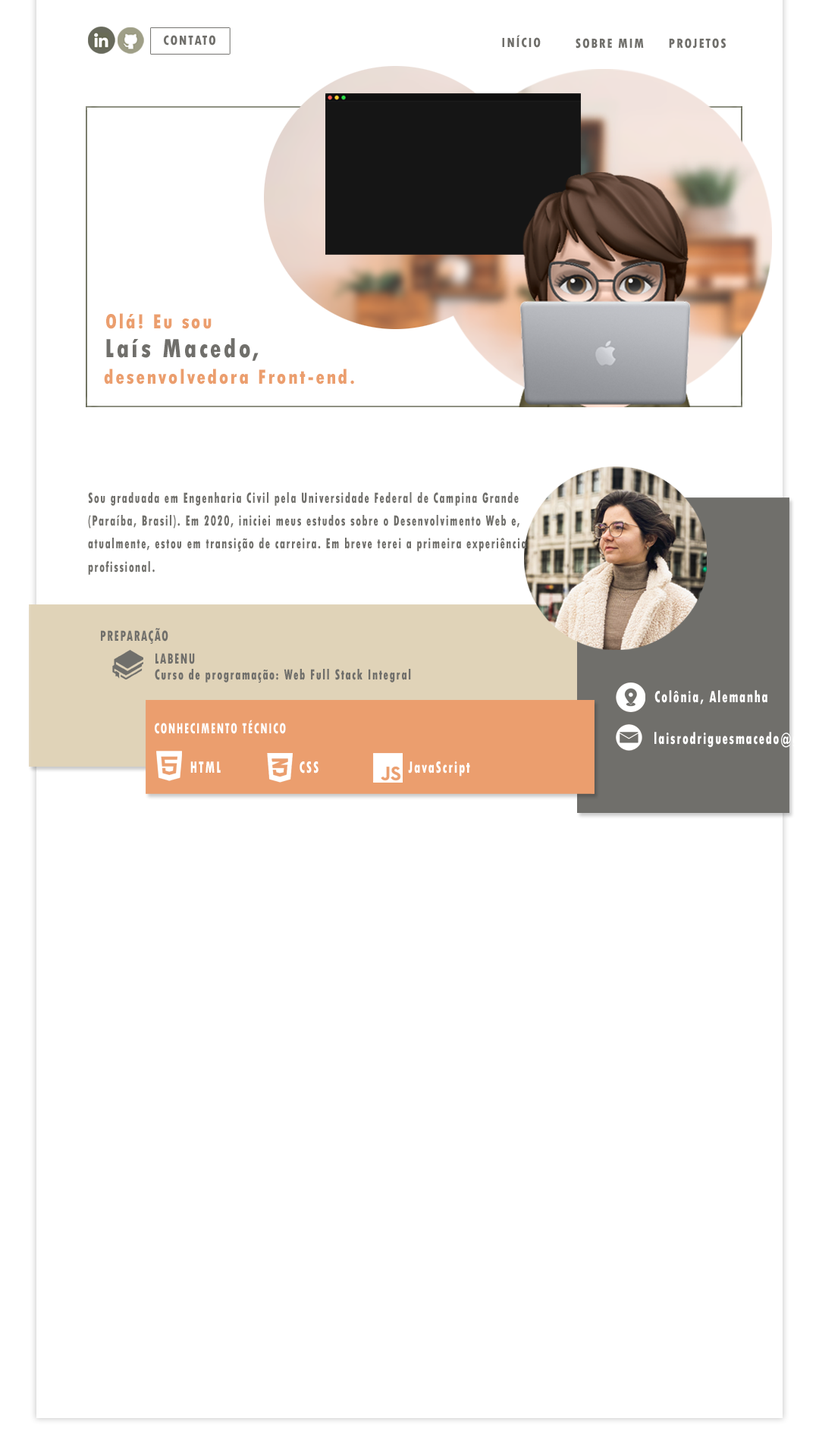
<style>
.page{position:relative;width:819px;height:1456px;background:#ffffff}
.page>*{position:absolute;margin:0}
.t1{font:13.9px "TwCenMT-CondensedExtraBold";letter-spacing:0.1em;color:#706f6b;scale:0.94 1}
.t2{font:21.6px "TwCenMT-CondensedExtraBold";letter-spacing:0.1em;color:#eb9e6e;scale:0.94 1}
.t3{font:27.7px "TwCenMT-CondensedExtraBold";letter-spacing:0.1em;color:#706f6b;scale:0.94 1}
.t4{font:15.4px/23.1px "TwCenMT-CondensedExtraBold";letter-spacing:0.1em;color:#706f6b;scale:0.73 1}
.t5{font:15.4px/15.4px "TwCenMT-CondensedExtraBold";letter-spacing:0.1em;color:#706f6b;scale:0.75 1}
.t6{font:15.4px/23.1px "TwCenMT-CondensedExtraBold";letter-spacing:0.1em;color:#706f6b;scale:0.75 1}
.t7{font:17.3px "TwCenMT-CondensedExtraBold";letter-spacing:0.1em;color:#ffffff;scale:0.75 1}
.t8{font:15.4px "TwCenMT-CondensedExtraBold";letter-spacing:0.1em;color:#ffffff;scale:0.75 1}
</style>
<div class="page">
<p class="t1" style="left:164px;top:35px;width:51px;height:10px">CONTATO</p>
<p class="t1" style="left:502px;top:35px;width:39px;height:13px">INÍCIO</p>
<p class="t1" style="left:576px;top:38px;width:68px;height:11px">SOBRE MIM</p>
<p class="t1" style="left:669px;top:38px;width:57px;height:11px">PROJETOS</p>
<p class="t2" style="left:106px;top:313px;width:106px;height:16px">Olá! Eu sou</p>
<p class="t3" style="left:106px;top:338px;width:153px;height:23px">Laís Macedo,</p>
<p class="t2" style="left:104px;top:369px;width:250px;height:15px">desenvolvedora Front-end.</p>
<p class="t4" style="left:88px;top:492px;width:438px;height:83px">Sou graduada em Engenharia Civil pela Universidade Federal de Campina Grande <br>(Paraíba, Brasil). Em 2020, iniciei meus estudos sobre o Desenvolvimento Web e, <br>atualmente, estou em transição de carreira. Em breve terei a primeira experiência<br>profissional.</p>
<p class="t5" style="left:101px;top:628px;width:310px;height:55px"><span class="t6">PREPARAÇÃO<br>  </span>LABENU<br>  Curso de programação: Web Full Stack Integral</p>
<p class="t7" style="left:654px;top:690px;width:113px;height:14px">Colônia, Alemanha</p>
<p class="t8" style="left:155px;top:720px;width:131px;height:14px">CONHECIMENTO TÉCNICO</p>
<p class="t7" style="left:190px;top:761px;width:280px;height:16px">HTML   CSS    JavaScript</p>
</div>
